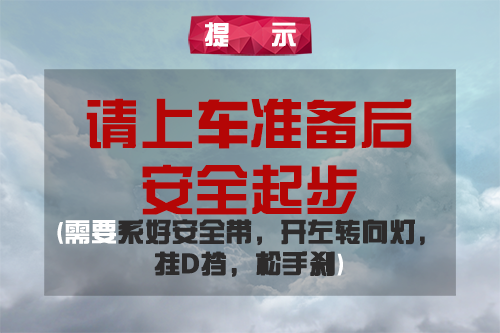
<style>
.page{position:relative;width:500px;height:333px}
.page>*{position:absolute;margin:0}
.t1{font:26.4px "FZZYJW--GB1-0";color:#ffffff}
.t2{font:26.4px "FZZYJW--GB1-0";color:#2d2b2b;font-weight:bold}
.t3{font:55px "FZZYJW--GB1-0";color:#b40606}
</style>
<div class="page">
<p class="t1" style="left:205px;top:22px;width:91px;height:25px">提 示</p>
<p class="t2" style="left:57px;top:98px;width:368px;height:179px;text-align:center"><span class="t3">请上车准备后<br>安全起步<br></span><span class="t1">(需要</span>系好安全带，开左转向灯，挂D挡，松手刹<span class="t1">)</span></p>
</div>
